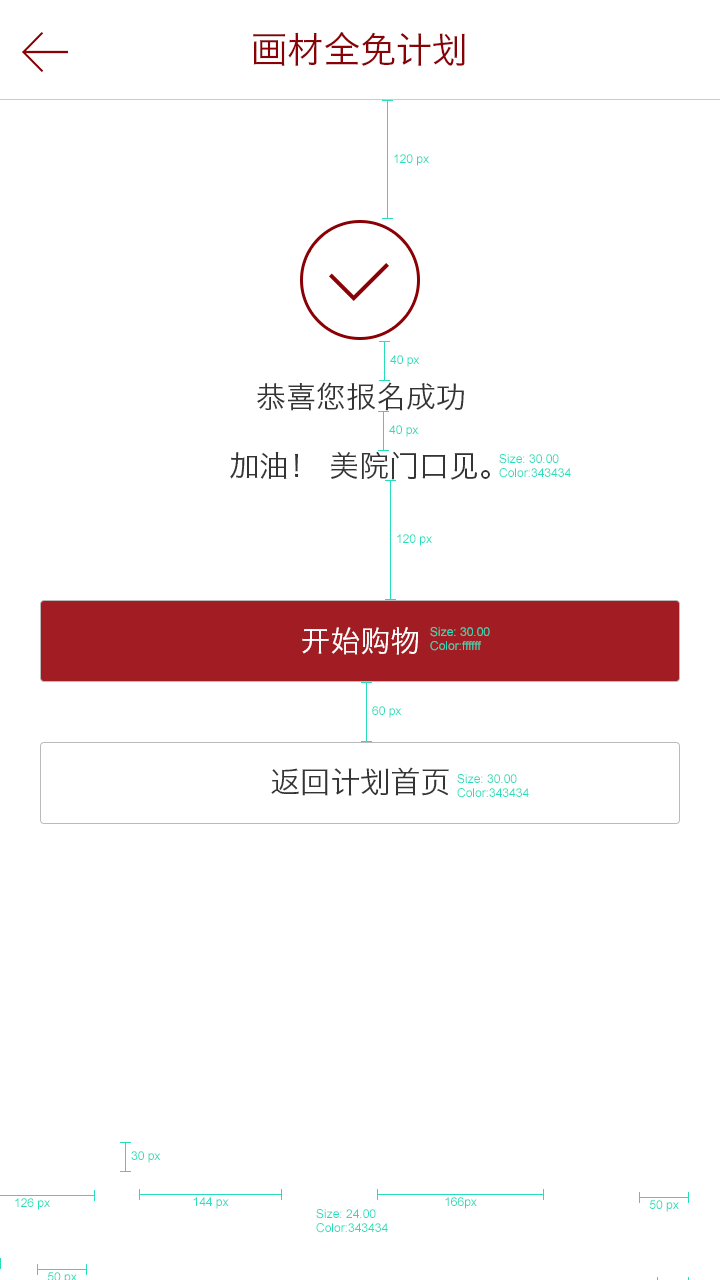
<style>
.page{position:relative;width:720px;height:1280px;background:#ffffff}
.page>*{position:absolute;margin:0}
.t1{font:36px "HiraginoSansGB-W3";color:#8a0105}
.t2{font:12px "ArialMT";color:#28ddb9}
.t3{font:30px "HiraginoSansGB-W3";color:#343434}
.t4{font:30px "HiraginoSansGB-W3";color:#ffffff}
</style>
<div class="page">
<p class="t1" style="left:253px;top:31px;width:212px;height:35px">画材全免计划</p>
<p class="t2" style="left:394px;top:154px;width:35px;height:12px">120 px</p>
<p class="t2" style="left:390px;top:355px;width:30px;height:12px">40 px</p>
<p class="t3" style="left:257px;top:382px;width:207px;height:29px">恭喜您报名成功</p>
<p class="t2" style="left:389px;top:425px;width:30px;height:12px">40 px</p>
<p class="t3" style="left:230px;top:451px;width:260px;height:29px">加油！ 美院门口见。</p>
<p class="t2" style="left:499px;top:454px;width:72px;height:24px">Size: 30.00<br>Color:343434</p>
<p class="t2" style="left:397px;top:534px;width:35px;height:12px">120 px</p>
<p class="t4" style="left:302px;top:627px;width:117px;height:28px">开始购物</p>
<p class="t2" style="left:430px;top:627px;width:60px;height:24px">Size: 30.00<br>Color:ffffff</p>
<p class="t2" style="left:372px;top:706px;width:30px;height:12px">60 px</p>
<p class="t3" style="left:271px;top:767px;width:178px;height:29px">返回计划首页</p>
<p class="t2" style="left:457px;top:774px;width:72px;height:24px">Size: 30.00<br>Color:343434</p>
<p class="t2" style="left:131px;top:1151px;width:30px;height:12px">30 px</p>
<p class="t2" style="left:15px;top:1198px;width:35px;height:12px">126 px</p>
<p class="t2" style="left:193px;top:1197px;width:36px;height:12px">144 px</p>
<p class="t2" style="left:445px;top:1197px;width:32px;height:12px">166px</p>
<p class="t2" style="left:649px;top:1200px;width:30px;height:12px">50 px</p>
<p class="t2" style="left:316px;top:1209px;width:72px;height:24px">Size: 24.00<br>Color:343434</p>
</div>
